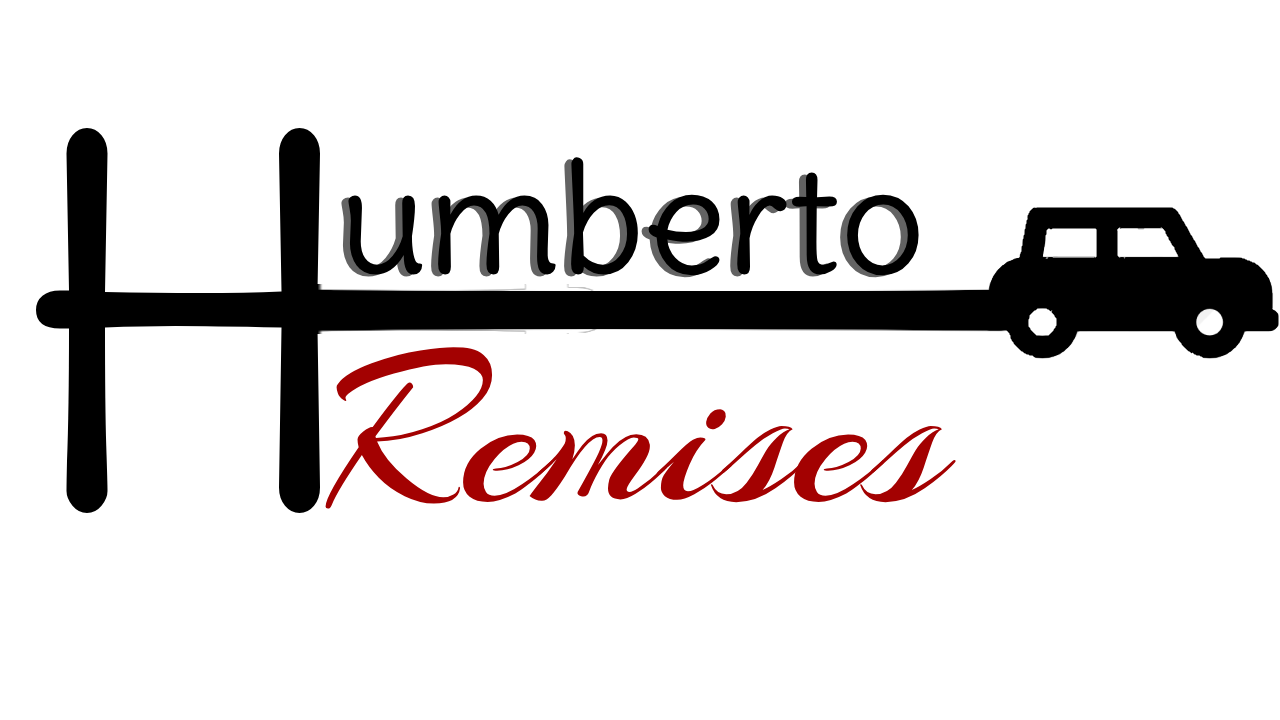
<style>
.page{position:relative;width:1280px;height:720px;background:#ffffff}
.page>*{position:absolute;margin:0}
.t1{font:152px "DeliusSwashCaps-Regular"}
.t2{font:152px "DeliusSwashCaps-Regular";color:#000000}
.t3{font:230px "Arizonia-Regular";color:#a30101}
</style>
<div class="page">
<p class="t1" style="left:341px;top:159px;width:571px;height:119px">umberto</p>
<p class="t2" style="left:348px;top:157px;width:571px;height:119px">umberto</p>
<p class="t3" style="left:325px;top:347px;width:631px;height:162px">Remises</p>
</div>
